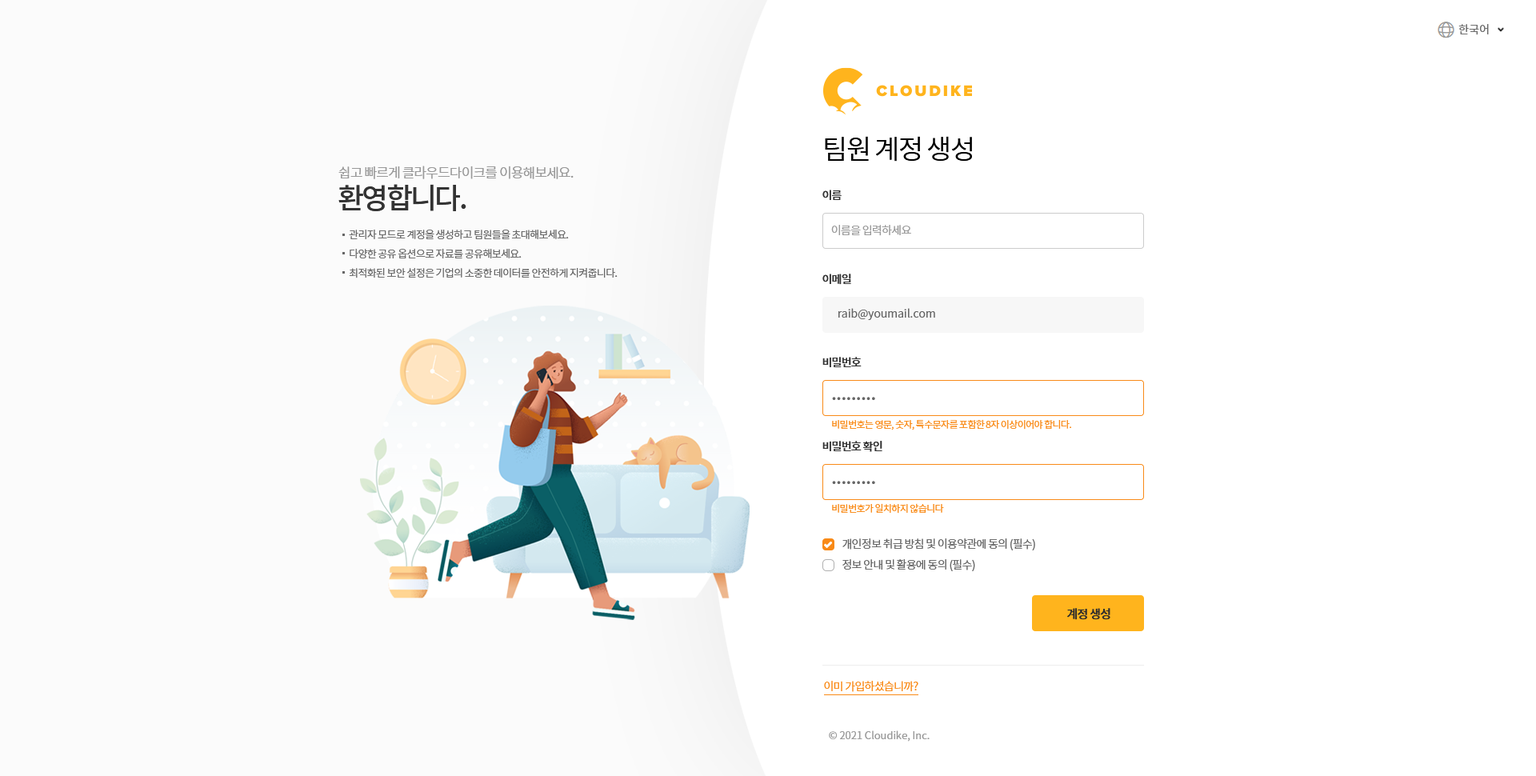
<style>
.page{position:relative;width:1536px;height:776px;background:#ffffff}
.page>*{position:absolute;margin:0}
.t1{font:11.2px "NotoSansCJKkr-DemiLight";color:#666666}
.t2{font:27.2px "NotoSansCJKkr-DemiLight";letter-spacing:-0.05em;color:#000000}
.t3{font:13.6px "NotoSansCJKkr-DemiLight";letter-spacing:-0.05em;color:#999999}
.t4{font:28.8px "NotoSansCJKkr-Medium";letter-spacing:-0.075em;color:#333333}
.t5{font:11.2px "NotoSansCJKkr-Medium";letter-spacing:-0.05em;color:#333333}
.t6{font:10.4px/19.2px "NotoSansCJKkr-DemiLight";letter-spacing:-0.05em;color:#666666}
.t7{font:11.2px "NotoSansCJKkr-DemiLight";letter-spacing:-0.05em;color:#999999}
.t8{font:22.4px "NotoSansCJKkr-DemiLight";letter-spacing:-0.05em;color:#666666}
.t9{font:9.6px "NotoSansCJKkr-DemiLight";letter-spacing:-0.05em;color:#f98a17}
.t10{font:11.2px "NotoSansCJKkr-DemiLight";letter-spacing:-0.05em;color:#666666}
.t11{font:12px "NotoSansCJKkr-Medium";letter-spacing:-0.05em;color:#2d2d2d}
.t12{font:11.2px "NotoSansCJKkr-DemiLight";letter-spacing:-0.05em;color:#f98a17}
.t13{font:10.4px "NotoSansCJKkr-DemiLight";color:#999999}
</style>
<div class="page">
<p class="t1" style="left:1459px;top:24px;width:30px;height:11px">한국어</p>
<p class="t2" style="left:825px;top:136px;width:147px;height:26px">팀원 계정 생성</p>
<p class="t3" style="left:338px;top:166px;width:236px;height:13px">쉽고 빠르게 클라우드다이크를 이용해보세요.</p>
<p class="t4" style="left:338px;top:184px;width:128px;height:27px">환영합니다.</p>
<p class="t5" style="left:823px;top:190px;width:19px;height:10px">이름</p>
<p class="t6" style="left:349px;top:230px;width:269px;height:48px">관리자 모드로 계정을 생성하고 팀원들을 초대해보세요.<br>다양한 공유 옵션으로 자료를 공유해보세요.<br>최적화된 보안 설정은 기업의 소중한 데이터를 안전하게 지켜줍니다.</p>
<p class="t7" style="left:831px;top:225px;width:80px;height:11px">이름을 입력하세요</p>
<p class="t5" style="left:823px;top:274px;width:28px;height:11px">이메일</p>
<p class="t1" style="left:839px;top:308px;width:96px;height:12px">raib@youmail.com</p>
<p class="t5" style="left:823px;top:357px;width:39px;height:10px">비밀번호</p>
<p class="t8" style="left:832px;top:397px;width:43px;height:3px">.........</p>
<p class="t9" style="left:832px;top:419px;width:239px;height:11px">비밀번호는 영문, 숫자, 특수문자를 포함한 8자 이상이어야 합니다.</p>
<p class="t5" style="left:823px;top:441px;width:60px;height:11px">비밀번호 확인</p>
<p class="t8" style="left:832px;top:481px;width:43px;height:3px">.........</p>
<p class="t9" style="left:832px;top:503px;width:112px;height:11px">비밀번호가 일치하지 않습니다</p>
<p class="t10" style="left:843px;top:539px;width:192px;height:12px">개인정보 취급 방침 및 이용약관에 동의 (필수)</p>
<p class="t10" style="left:843px;top:559px;width:132px;height:12px">정보 안내 및 활용에 동의 (필수)</p>
<p class="t11" style="left:1067px;top:608px;width:44px;height:12px">계정 생성</p>
<p class="t12" style="left:824px;top:681px;width:95px;height:11px">이미 가입하셨습니까?</p>
<p class="t13" style="left:829px;top:731px;width:101px;height:11px">© 2021 Cloudike, Inc.</p>
</div>
